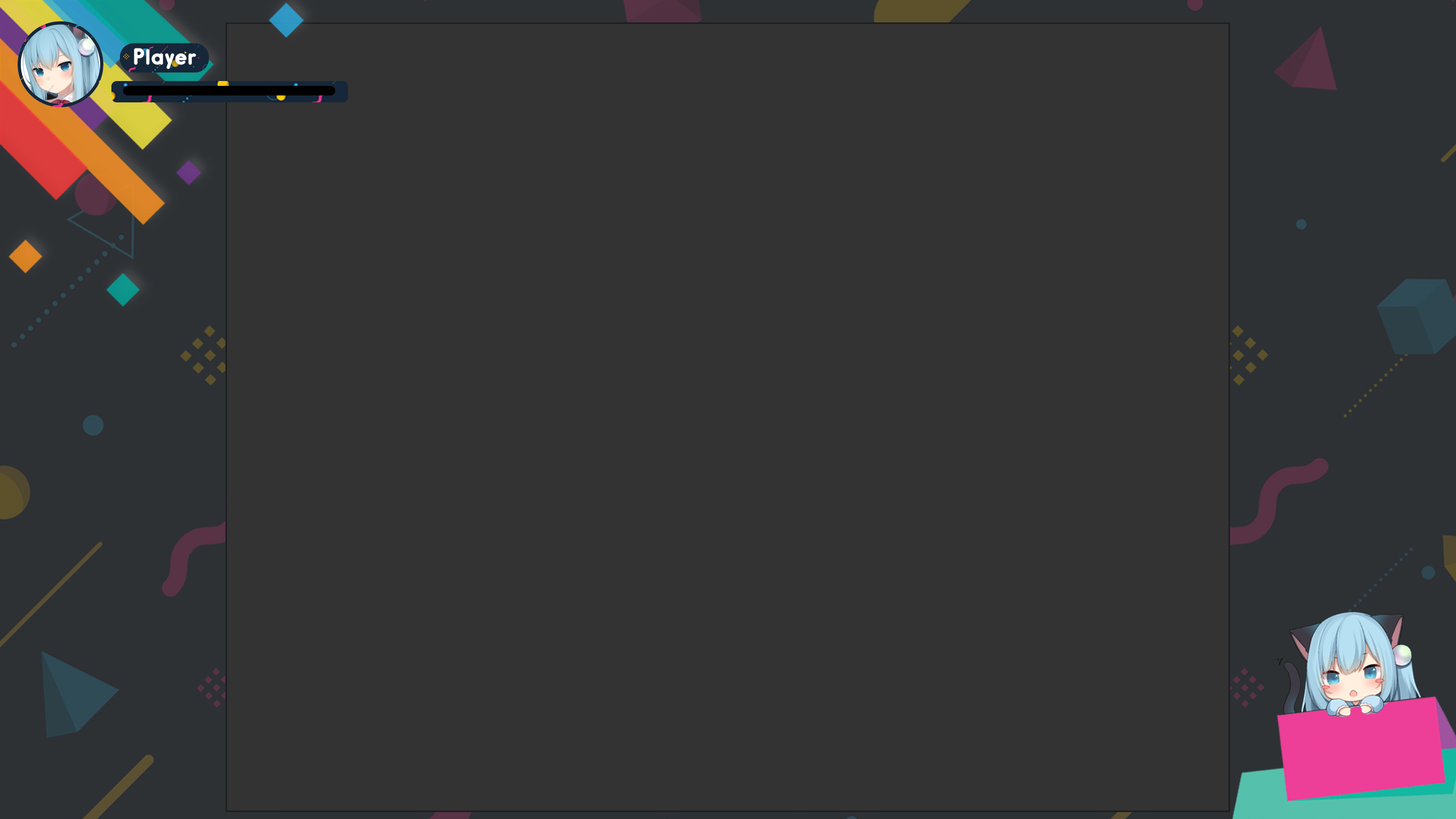
<style>
.page{position:relative;width:1456px;height:819px;background:#333333}
.page>*{position:absolute;margin:0}
.t1{font:21.3px "HirukoPro-Regular";letter-spacing:0.01em;color:#ffffff;font-weight:bold}
</style>
<div class="page">
<p class="t1" style="left:134px;top:48px;width:62px;height:21px">Player</p>
</div>
